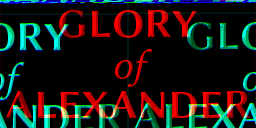
<style>
.page{position:relative;width:256px;height:128px;background:#000000}
.page>*{position:absolute;margin:0}
.t1{font:40.6px/40.6px "LinBiolinumOB"}
.t2{font:40.6px/40.6px "LinBiolinumOI"}
</style>
<div class="page">
<p class="t1" style="left:5px;top:9px;width:245px;height:108px;text-align:center">GLORY<br><span class="t2">of<br></span>ALEXANDER</p>
</div>
